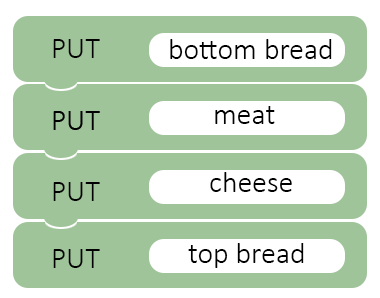
<style>
.page{position:relative;width:380px;height:298px;background:#a0c49a}
.page>*{position:absolute;margin:0}
.t1{font:30px "Calibri-Light";color:#000000}
</style>
<div class="page">
<p class="t1" style="left:53px;top:39px;width:47px;height:19px">PUT</p>
<p class="t1" style="left:170px;top:39px;width:162px;height:20px">bottom bread</p>
<p class="t1" style="left:215px;top:106px;width:60px;height:18px">meat</p>
<p class="t1" style="left:210px;top:172px;width:82px;height:20px">cheese</p>
<p class="t1" style="left:53px;top:182px;width:47px;height:19px">PUT</p>
<p class="t1" style="left:188px;top:243px;width:116px;height:25px">top bread</p>
<p class="t1" style="left:53px;top:249px;width:47px;height:19px">PUT</p>
</div>
